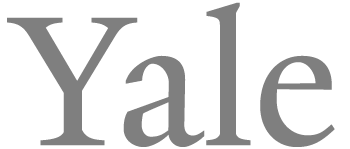
<style>
.page{position:relative;width:350px;height:149px;background:#ffffff}
.page>*{position:absolute;margin:0}
.t1{font:200px "YaleDesign-Roman";color:#7f7f7f}
</style>
<div class="page">
<p class="t1" style="left:7px;top:2px;width:328px;height:145px">Yale</p>
</div>
